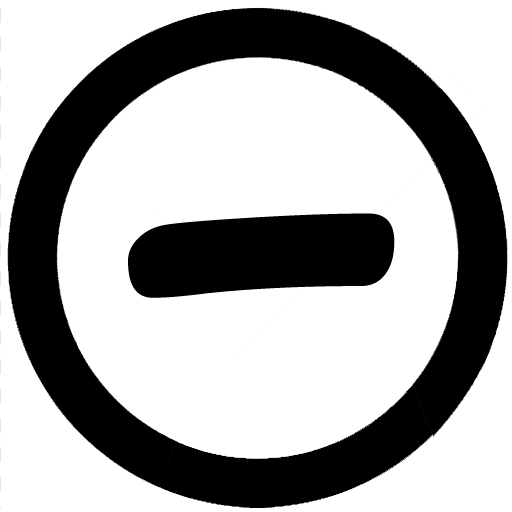
<style>
.page{position:relative;width:512px;height:512px;background:#ffffff}
.page>*{position:absolute;margin:0}
.t1{font:775.1px "MVBoli";letter-spacing:-0.085em;color:#000000}
</style>
<div class="page">
<p class="t1" style="left:128px;top:213px;width:267px;height:85px">-</p>
</div>
